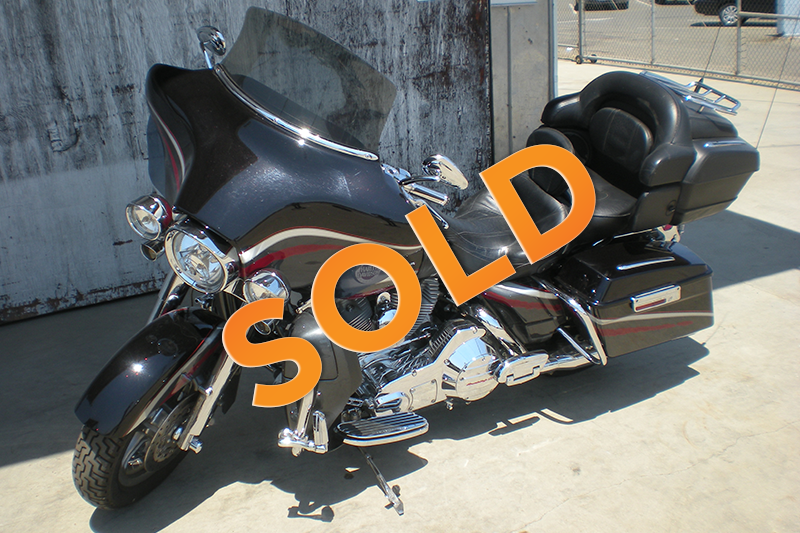
<style>
.page{position:relative;width:800px;height:533px}
.page>*{position:absolute;margin:0}
.t1{font:150px "Montserrat-Bold";color:#f78f20}
</style>
<div class="page">
<p class="t1" style="left:222px;top:144px;width:374px;height:264px;rotate:-30deg">SOLD</p>
</div>
